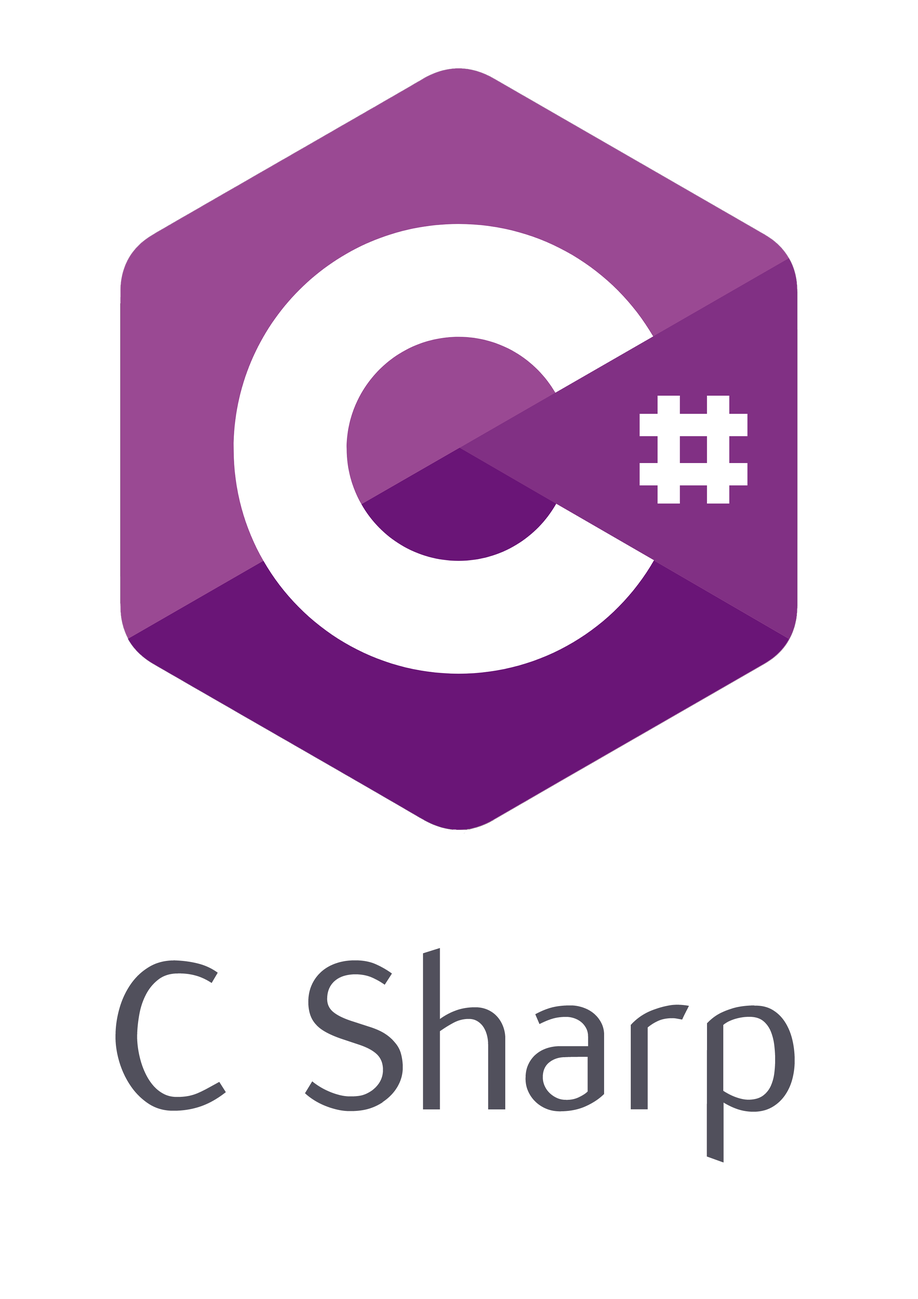
<style>
.page{position:relative;width:918px;height:1299px;background:#ffffff}
.page>*{position:absolute;margin:0}
.t1{font:231.4px "Flux";color:#51505c}
</style>
<div class="page">
<p class="t1" style="left:116px;top:948px;width:679px;height:214px">C Sharp</p>
</div>
